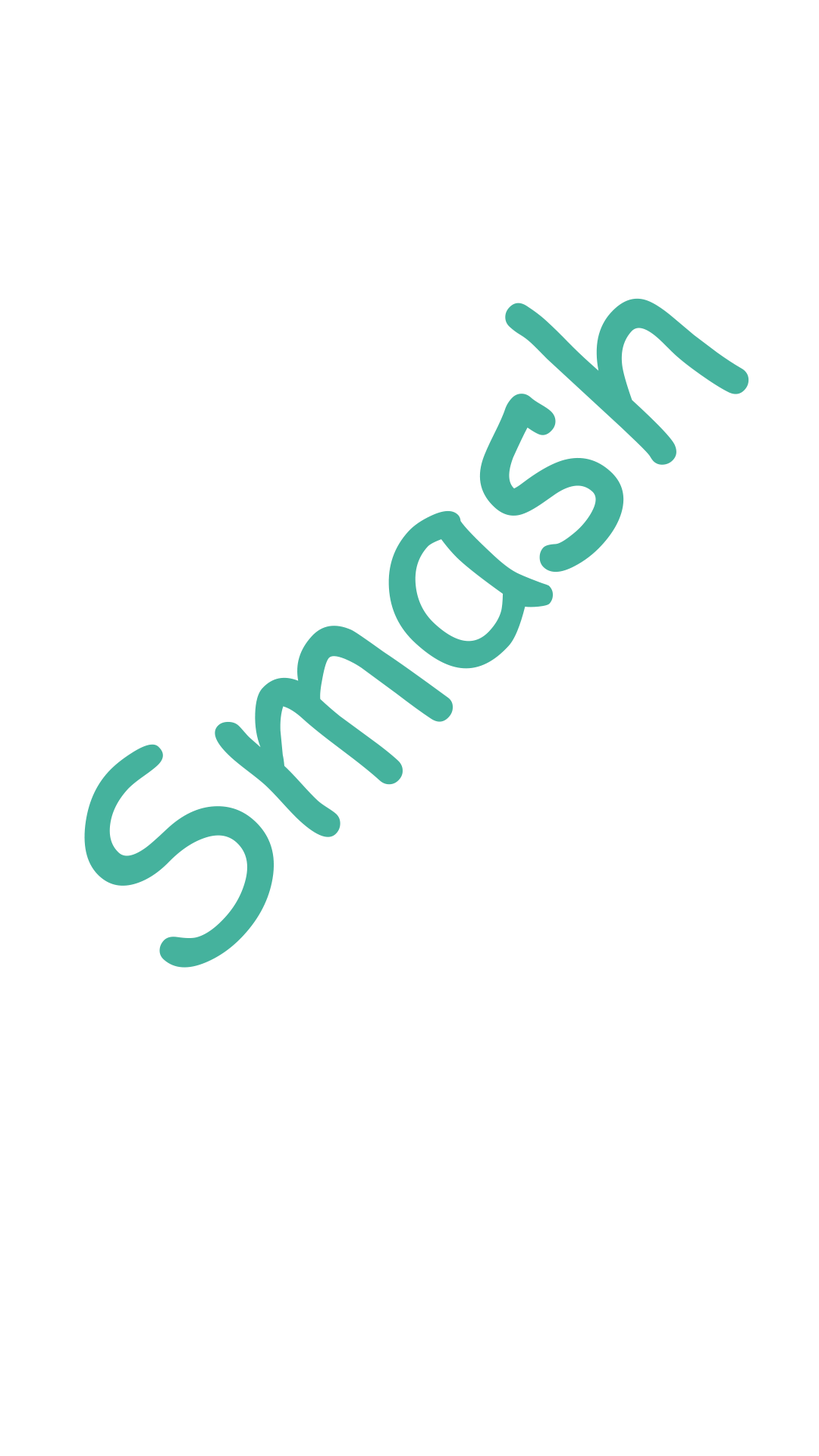
<style>
.page{position:relative;width:819px;height:1456px;background:#ffffff}
.page>*{position:absolute;margin:0}
.t1{font:282.1px "ComicSansMS";color:#45b29d}
</style>
<div class="page">
<p class="t1" style="left:84px;top:298px;width:665px;height:670px;rotate:-48deg">Smash</p>
</div>
